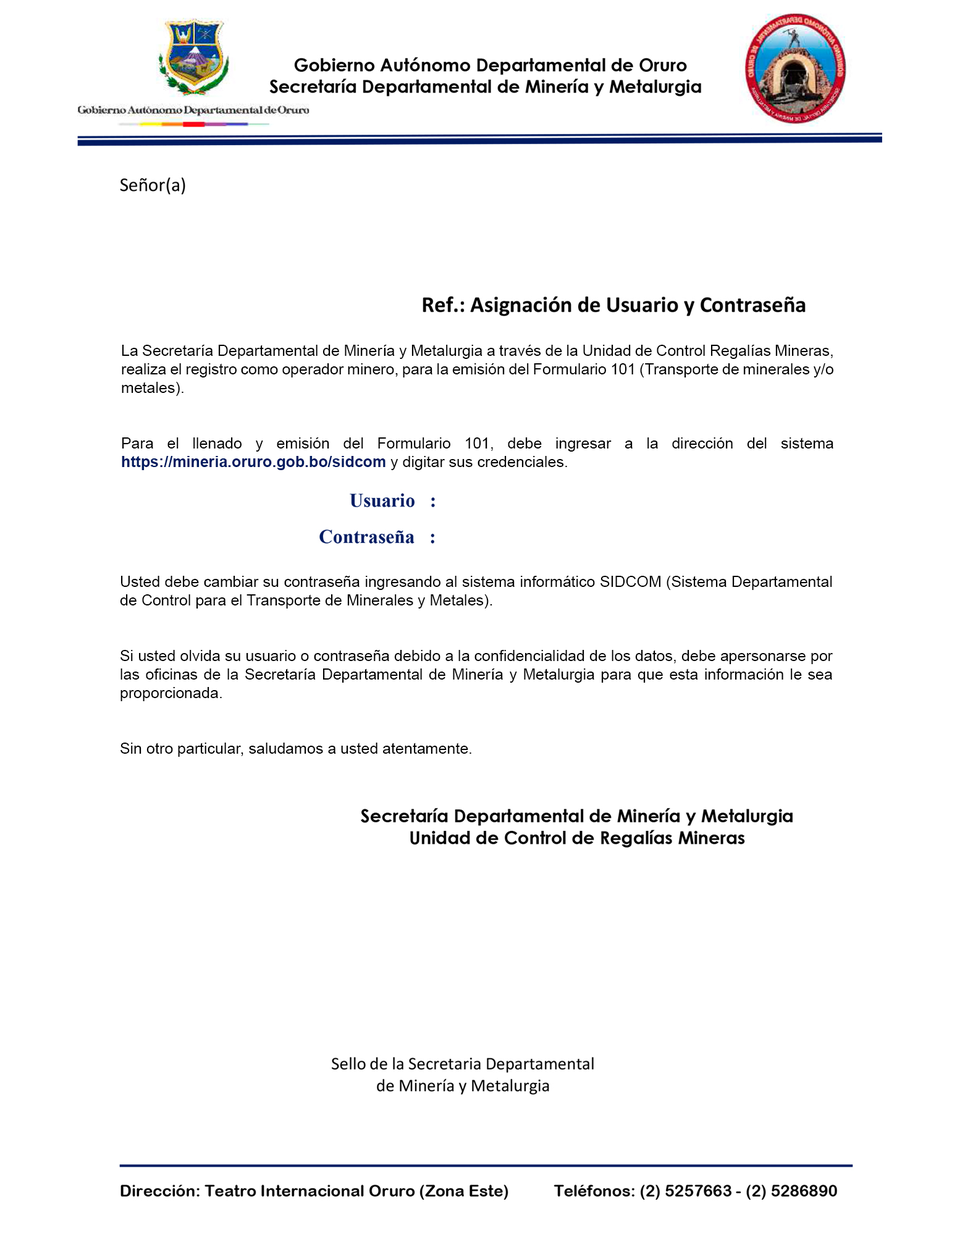
<style>
.page{position:relative;width:960px;height:1243px;background:#ffffff}
.page>*{position:absolute;margin:0}
.t1{font:15.4px "ArialMT";color:#000000}
.t2{font:15.4px "Arial-BoldMT";color:#001c61}
</style>
<div class="page">
<p class="t1" style="left:122px;top:345px;width:711px;height:125px;text-align:justify">La Secretaría Departamental de Minería y Metalurgia a través de la Unidad de Control Regalías Mineras, realiza el registro como operador minero, para la emisión del Formulario 101 (Transporte de minerales y/o metales).<br><br><br>Para el llenado y emisión del Formulario 101, debe ingresar a la dirección del sistema <span class="t2">https://mineria.oruro.gob.bo/sidcom</span> y digitar sus credenciales.</p>
<p class="t1" style="left:120px;top:576px;width:712px;height:181px;text-align:justify">Usted debe cambiar su contraseña ingresando al sistema informático SIDCOM (Sistema Departamental de Control para el Transporte de Minerales y Metales).<br><br> <br>Si usted olvida su usuario o contraseña debido a la confidencialidad de los datos, debe apersonarse por las oficinas de la Secretaría Departamental de Minería y Metalurgia para que esta información le sea proporcionada.<br><br><br>Sin otro particular, saludamos a usted atentamente.</p>
</div>
